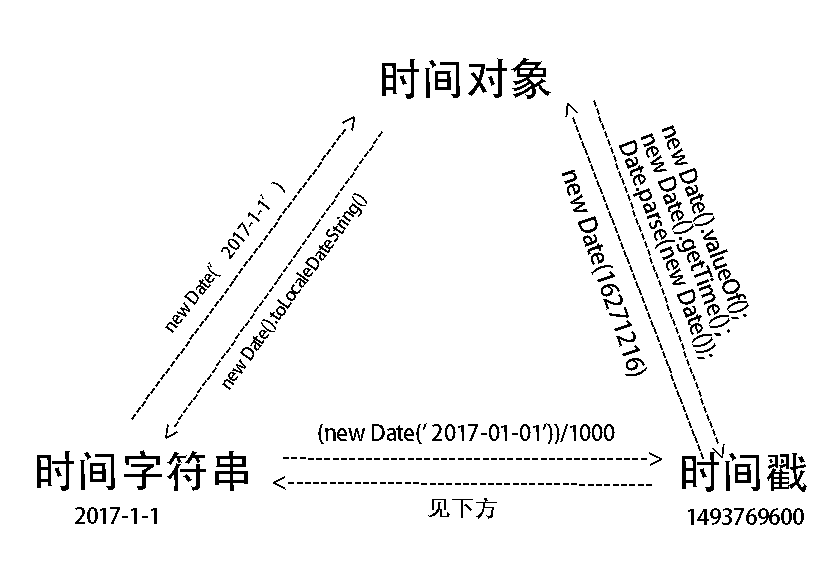
<style>
.page{position:relative;width:834px;height:576px;background:#ffffff}
.page>*{position:absolute;margin:0}
.t1{font:43.4px "AdobeHeitiStd-Regular";color:#000000}
.t2{font:23.1px "AdobeHeitiStd-Regular";color:#000000}
.t3{font:22.6px/22.6px "AdobeHeitiStd-Regular";color:#000000}
.t4{font:24.2px "AdobeHeitiStd-Regular";color:#000000}
.t5{font:17.5px "AdobeHeitiStd-Regular";color:#000000}
.t6{font:22.1px "AdobeHeitiStd-Regular";color:#000000}
.t7{font:22.9px "AdobeHeitiStd-Regular";color:#000000}
.t8{font:24.3px "AdobeHeitiStd-Regular";color:#000000}
</style>
<div class="page">
<p class="t1" style="left:382px;top:58px;width:169px;height:41px">时间对象</p>
<p class="t2" style="left:131px;top:116px;width:224px;height:304px;rotate:-54deg">--------------------------------------------&gt;</p>
<p class="t3" style="left:619px;top:125px;width:130px;height:234px;rotate:69deg">new Date().valueOf();<br>new Date().getTime()；<br>Date.parse(new Date());</p>
<p class="t2" style="left:165px;top:131px;width:218px;height:308px;rotate:125deg">--------------------------------------------&gt;</p>
<p class="t4" style="left:562px;top:170px;width:85px;height:206px;rotate:71deg">new Date(16271216)</p>
<p class="t5" style="left:165px;top:182px;width:120px;height:151px;rotate:-52deg">new Date(’2017-1-1’)</p>
<p class="t5" style="left:222px;top:193px;width:145px;height:197px;rotate:-54deg">new Date().toLocaleDateString()</p>
<p class="t6" style="left:318px;top:423px;width:297px;height:21px">(new Date(' 2017-01-01'))/1000</p>
<p class="t1" style="left:37px;top:450px;width:211px;height:41px">时间字符串</p>
<p class="t7" style="left:283px;top:452px;width:379px;height:14px">--------------------------------------------&gt;</p>
<p class="t1" style="left:682px;top:452px;width:125px;height:40px">时间戳</p>
<p class="t7" style="left:273px;top:476px;width:379px;height:14px;rotate:-180deg">--------------------------------------------&gt;</p>
<p class="t6" style="left:75px;top:507px;width:82px;height:17px">2017-1-1</p>
<p class="t8" style="left:428px;top:498px;width:69px;height:21px">见下方</p>
<p class="t6" style="left:688px;top:508px;width:116px;height:17px">1493769600</p>
</div>
